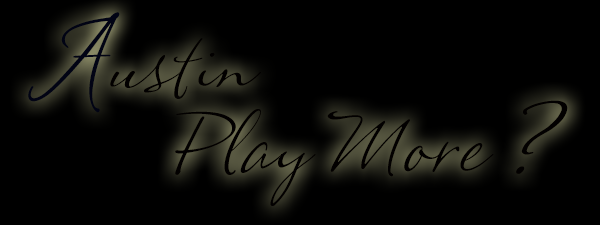
<style>
.page{position:relative;width:600px;height:225px;background:#000000}
.page>*{position:absolute;margin:0}
.t1{font:100px "KatTailHMK";color:#010314}
.t2{font:75px "KatTailHMK";color:#020000}
.t3{font:100px "KatTailHMK";color:#020000}
</style>
<div class="page">
<p class="t1" style="left:28px;top:12px;width:92px;height:101px">A</p>
<p class="t2" style="left:110px;top:38px;width:151px;height:61px">ustin</p>
<p class="t3" style="left:516px;top:100px;width:52px;height:74px">?</p>
<p class="t2" style="left:175px;top:109px;width:319px;height:97px">Play More</p>
</div>
